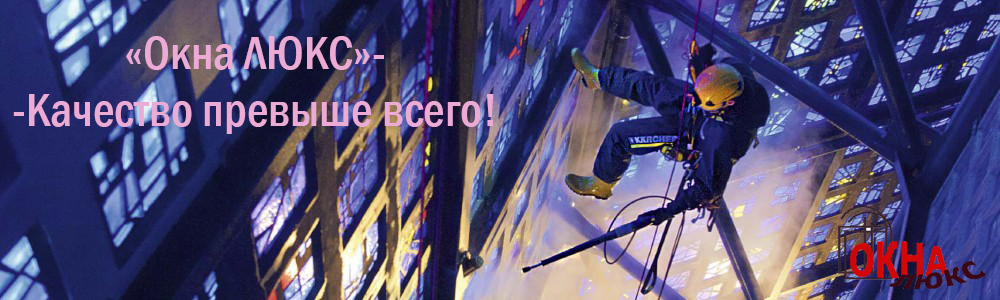
<style>
.page{position:relative;width:1000px;height:300px}
.page>*{position:absolute;margin:0}
.t1{font:48px "FranklinGothic-MediumCond";color:#ebabd5}
</style>
<div class="page">
<p class="t1" style="left:13px;top:36px;width:481px;height:98px;text-align:center">«Окна ЛЮКС»-<br>-Качество превыше всего!</p>
</div>
